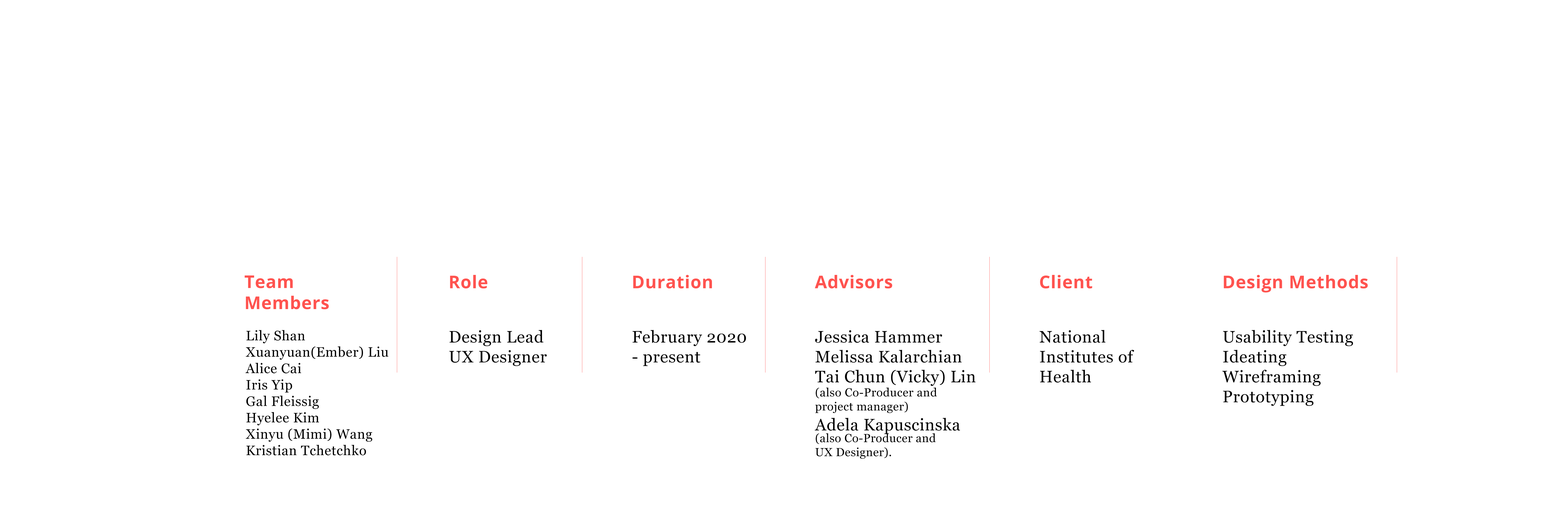
<style>
.page{position:relative;width:1568px;height:521px;background:#ffffff}
.page>*{position:absolute;margin:0}
.t1{font:17.6px "OpenSans-Bold";letter-spacing:0.025em;color:#ff534f}
.t2{font:13.7px "Georgia";letter-spacing:0.025em;color:#000000}
.t3{font:16.6px "Georgia";letter-spacing:0.025em;color:#000000}
.t4{font:11.7px "Georgia";letter-spacing:0.025em;color:#000000}
.t5{font:11.7px/11.7px "Georgia";letter-spacing:0.02em;color:#000000}
.t6{font:11.7px "Georgia";letter-spacing:0.02em;color:#000000}
</style>
<div class="page">
<p class="t1" style="left:244px;top:275px;width:85px;height:34px">Team <br>Members</p>
<p class="t1" style="left:450px;top:275px;width:37px;height:14px">Role</p>
<p class="t1" style="left:633px;top:275px;width:79px;height:14px">Duration</p>
<p class="t1" style="left:815px;top:275px;width:77px;height:14px">Advisors</p>
<p class="t1" style="left:1040px;top:275px;width:52px;height:14px">Client</p>
<p class="t1" style="left:1224px;top:275px;width:144px;height:18px">Design Methods</p>
<p class="t2" style="left:245px;top:330px;width:144px;height:126px">Lily Shan <br>Xuanyuan(Ember) Liu <br>Alice Cai <br>Iris Yip <br>Gal Fleissig <br>Hyelee Kim <br>Xinyu (Mimi) Wang <br>Kristian Tchetchko</p>
<p class="t3" style="left:449px;top:330px;width:98px;height:36px">Design Lead<br>UX Designer</p>
<p class="t3" style="left:633px;top:330px;width:113px;height:36px">February 2020 <br>- present</p>
<p class="t3" style="left:1039px;top:330px;width:95px;height:53px">National <br>Institutes of <br>Health</p>
<p class="t3" style="left:1222px;top:330px;width:131px;height:76px">Usability Testing<br>Ideating <br>Wireframing<br>Prototyping</p>
<p class="t3" style="left:815px;top:330px;width:160px;height:129px">Jessica Hammer <br>Melissa Kalarchian <br>Tai Chun (Vicky) Lin <br><span class="t4">(also Co-Producer and <br>project manager) <br></span>Adela Kapuscinska <br><span class="t5">(also Co-Producer and <br></span><span class="t6">UX Designer)</span><span class="t4">.</span></p>
</div>
